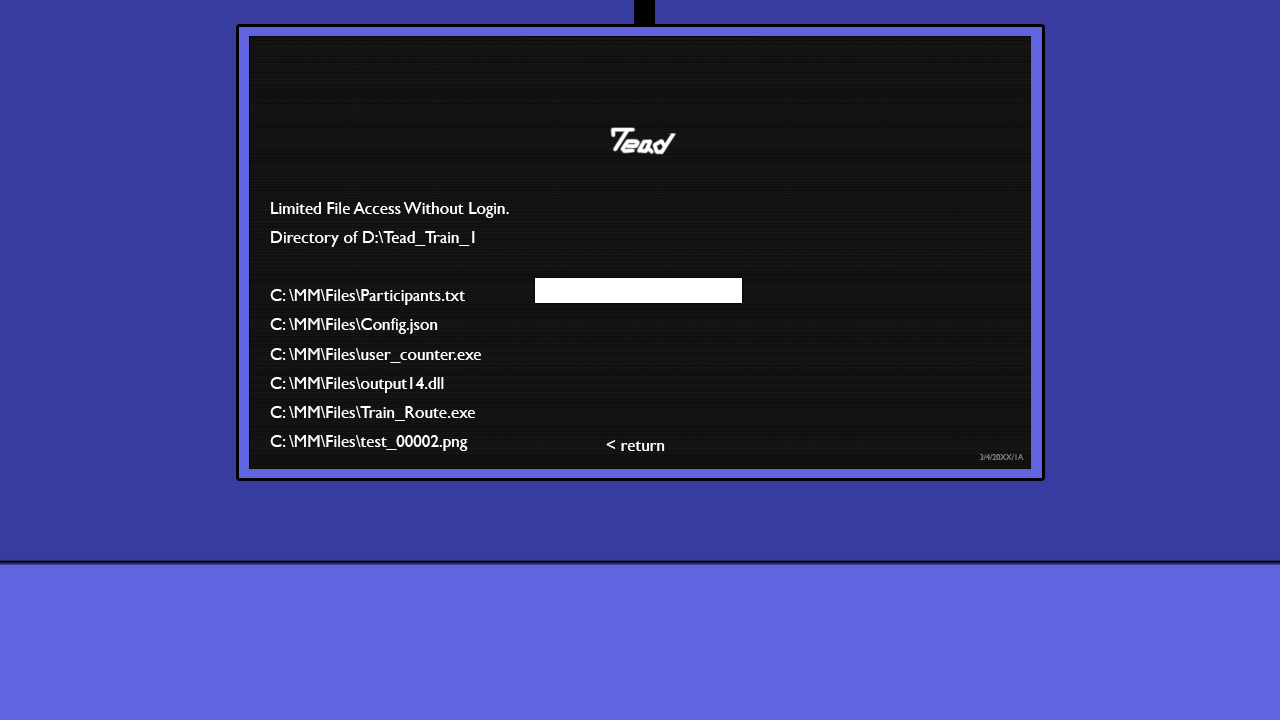
<style>
.page{position:relative;width:1280px;height:720px;background:#383b9f}
.page>*{position:absolute;margin:0}
.t1{font:17.1px/29.1px "GillSansMT";color:#ffffff}
.t2{font:17.1px "GillSansMT";color:#ffffff}
.t3{font:8px "GillSansMT";color:#7c7c7c}
</style>
<div class="page">
<p class="t1" style="left:270px;top:202px;width:239px;height:249px">Limited File Access Without Login.<br>Directory of D:\Tead_Train_1<br><br>C: \MM\Files\Participants.txt<br>C: \MM\Files\Config.json<br>C: \MM\Files\user_counter.exe<br>C: \MM\Files\output14.dll<br>C: \MM\Files\Train_Route.exe<br>C: \MM\Files\test_00002.png</p>
<p class="t2" style="left:606px;top:440px;width:59px;height:11px">&lt; return</p>
<p class="t3" style="left:980px;top:454px;width:44px;height:6px">3/4/20XX/1A</p>
</div>
